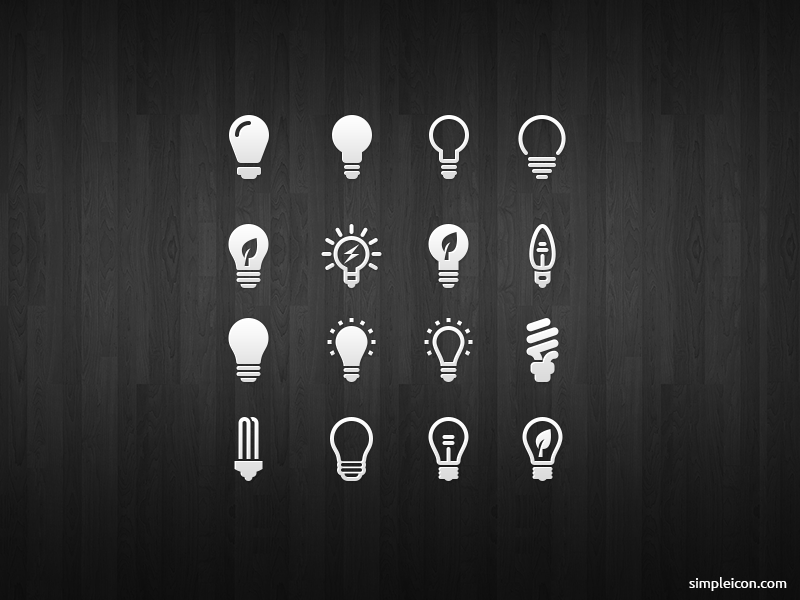
<style>
.page{position:relative;width:800px;height:600px}
.page>*{position:absolute;margin:0}
.t1{font:14px "Ubuntu";color:#ffffff}
</style>
<div class="page">
<p class="t1" style="left:689px;top:577px;width:98px;height:14px">simpleicon.com</p>
</div>
